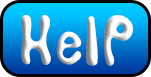
<style>
.page{position:relative;width:151px;height:77px}
.page>*{position:absolute;margin:0}
.t1{font:52px "SORRY_SORRY";letter-spacing:0.03em}
</style>
<div class="page">
<p class="t1" style="left:21px;top:15px;width:112px;height:51px">HelP</p>
</div>
